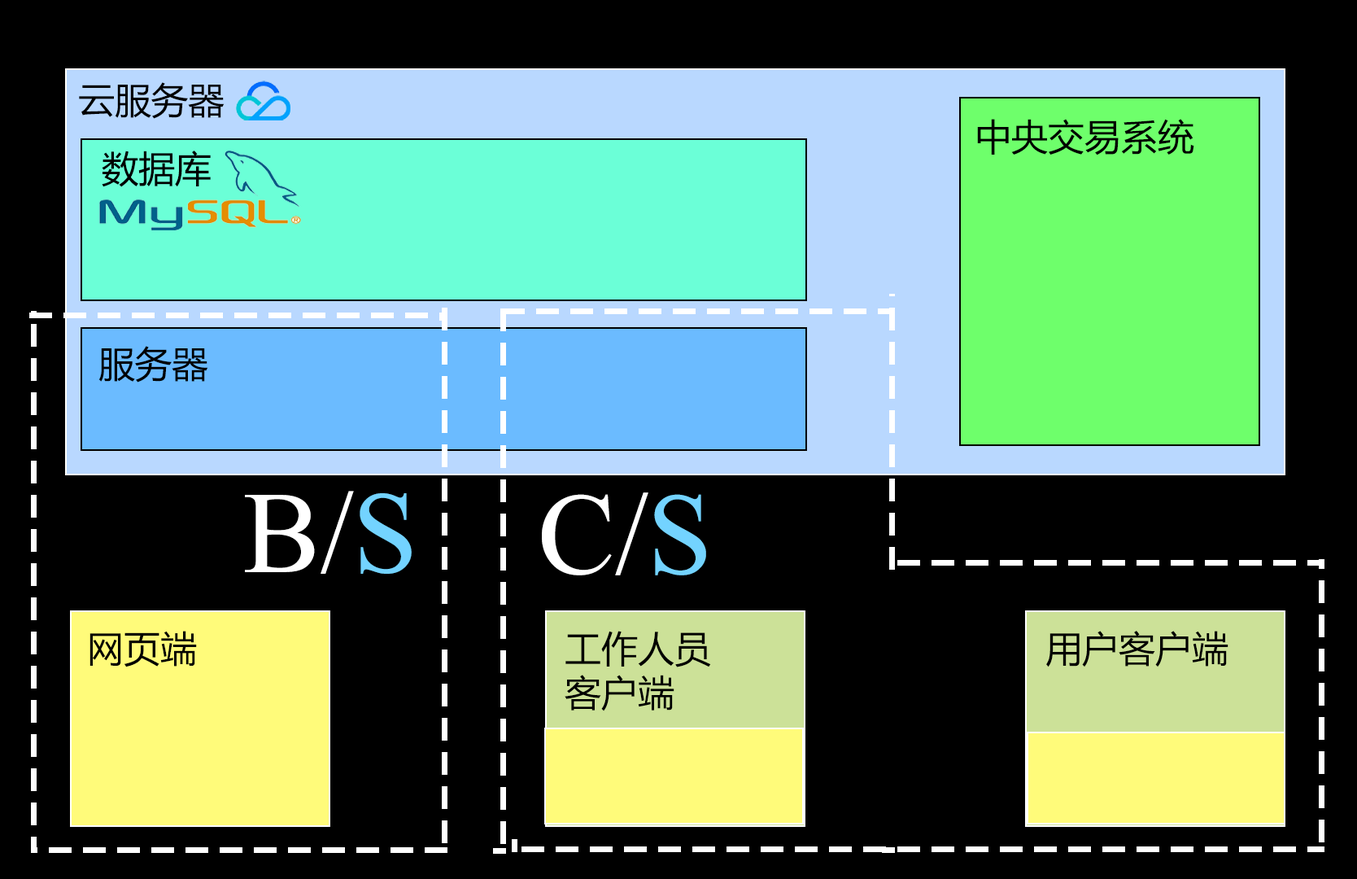
<style>
.page{position:relative;width:1357px;height:879px;background:#000000}
.page>*{position:absolute;margin:0}
.t1{font:36.6px "MicrosoftYaHei";color:#000000}
.t2{font:116.4px "TimesNewRomanPSMT";color:#ffffff}
.t3{font:116.4px "TimesNewRomanPSMT";color:#73d3ff}
.t4{font:36.6px/14.8px "MicrosoftYaHei";color:#000000}
</style>
<div class="page">
<p class="t1" style="left:79px;top:82px;width:146px;height:37px">云服务器</p>
<p class="t1" style="left:977px;top:119px;width:217px;height:36px">中央交易系统</p>
<p class="t1" style="left:102px;top:151px;width:109px;height:36px">数据库</p>
<p class="t1" style="left:98px;top:346px;width:110px;height:36px">服务器</p>
<p class="t2" style="left:245px;top:491px;width:167px;height:83px">B/<span class="t3">S</span></p>
<p class="t2" style="left:542px;top:492px;width:164px;height:83px">C/<span class="t3">S</span></p>
<p class="t1" style="left:89px;top:631px;width:108px;height:36px">网页端</p>
<p class="t4" style="left:565px;top:631px;width:146px;height:80px">工作人员<br><br><br>客户端</p>
<p class="t1" style="left:1046px;top:631px;width:183px;height:36px">用户客户端</p>
</div>
